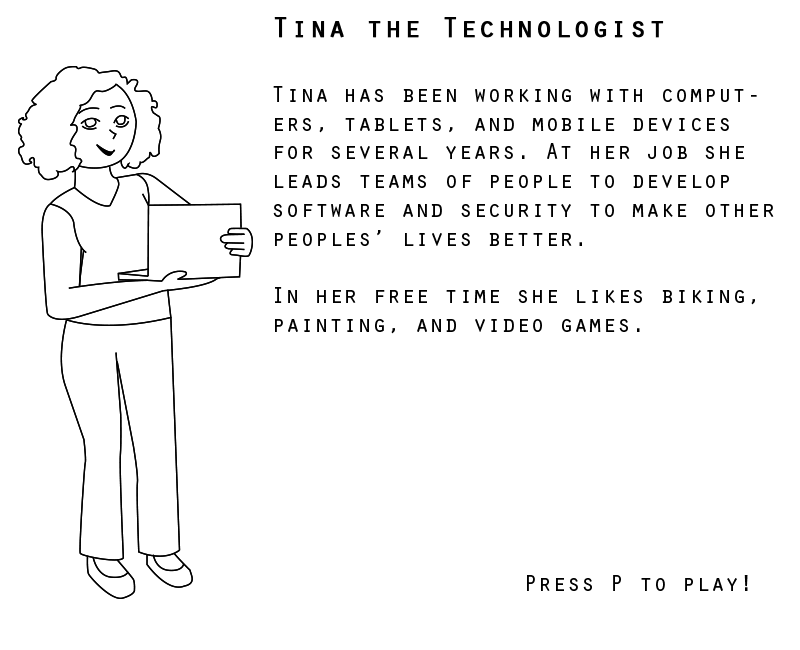
<style>
.page{position:relative;width:800px;height:650px;background:#ffffff}
.page>*{position:absolute;margin:0}
.t1{font:24px "OratorStd";color:#000000}
.t2{font:30px "OratorStd";color:#000000;font-weight:bold}
</style>
<div class="page">
<p class="t1" style="left:273px;top:17px;width:501px;height:574px"><span class="t2">Tina the Technologist<br><br></span>Tina has been working with computers, tablets, and mobile devices for several years. At her job she leads teams of people to develop software and security to make other peoples’ lives better.<br><br>In her free time she likes biking, painting, and video games.<br><br><br><br><br><br><br><br><br>       Press P to play!</p>
</div>
